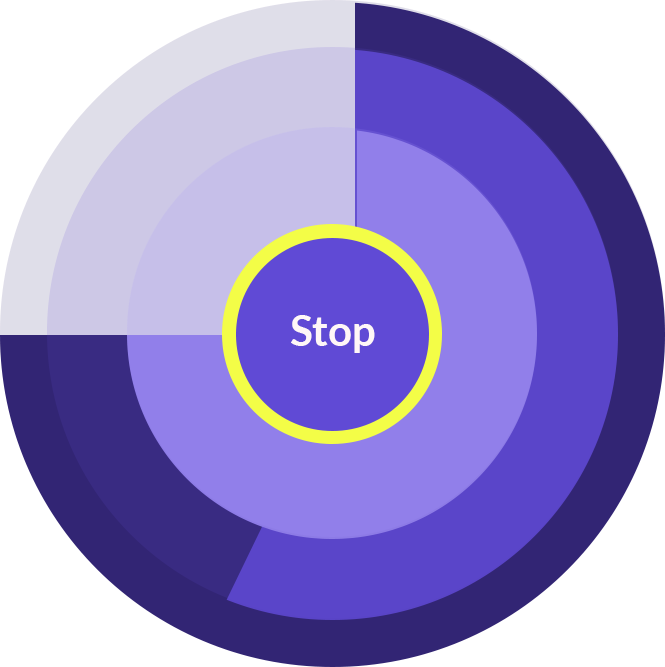
<style>
.page{position:relative;width:665px;height:667px;background:#ffffff}
.page>*{position:absolute;margin:0}
.t1{font:42px "Lato-Bold";color:#fff7f7}
</style>
<div class="page">
<p class="t1" style="left:291px;top:315px;width:84px;height:38px">Stop</p>
</div>
